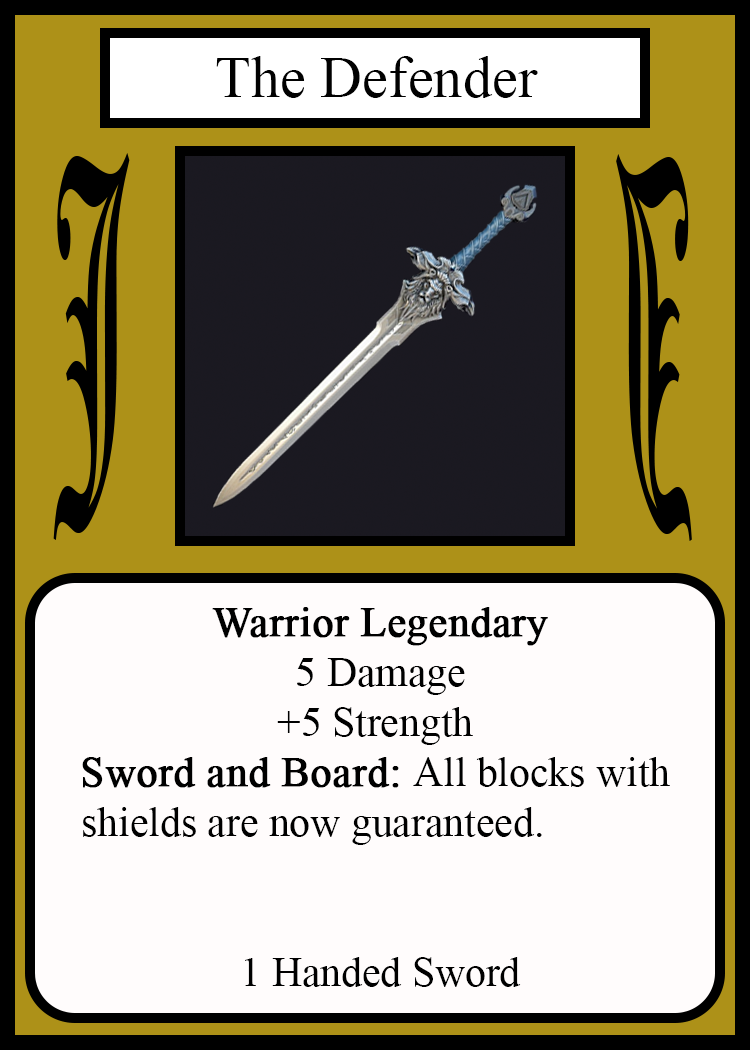
<style>
.page{position:relative;width:750px;height:1050px;background:#fffcfc}
.page>*{position:absolute;margin:0}
.t1{font:58.3px "TimesNewRomanPSMT";color:#010101}
.t2{font:450.1px "OldEnglishTextMT";color:#000000;scale:0.26 1}
.t3{font:449.7px "OldEnglishTextMT";color:#000000;scale:0.26 1}
.t4{font:41.7px "TimesNewRomanPSMT";color:#000000}
.t5{font:41.7px "TimesNewRomanPSMT";color:#000000;font-weight:bold}
</style>
<div class="page">
<p class="t1" style="left:216px;top:56px;width:322px;height:42px">The Defender</p>
<p class="t2" style="left:53px;top:153px;width:77px;height:387px">J</p>
<p class="t3" style="left:616px;top:154px;width:76px;height:387px;rotate:180deg">J</p>
<p class="t4" style="left:82px;top:607px;width:588px;height:380px;text-align:center"><span class="t5">Warrior Legendary<br></span> 5 Damage<br>+5 Strength<br><span class="t5">Sword and Board: </span>All blocks with<br>shields are now guaranteed.            <br> <br><br> 1 Handed Sword</p>
</div>
